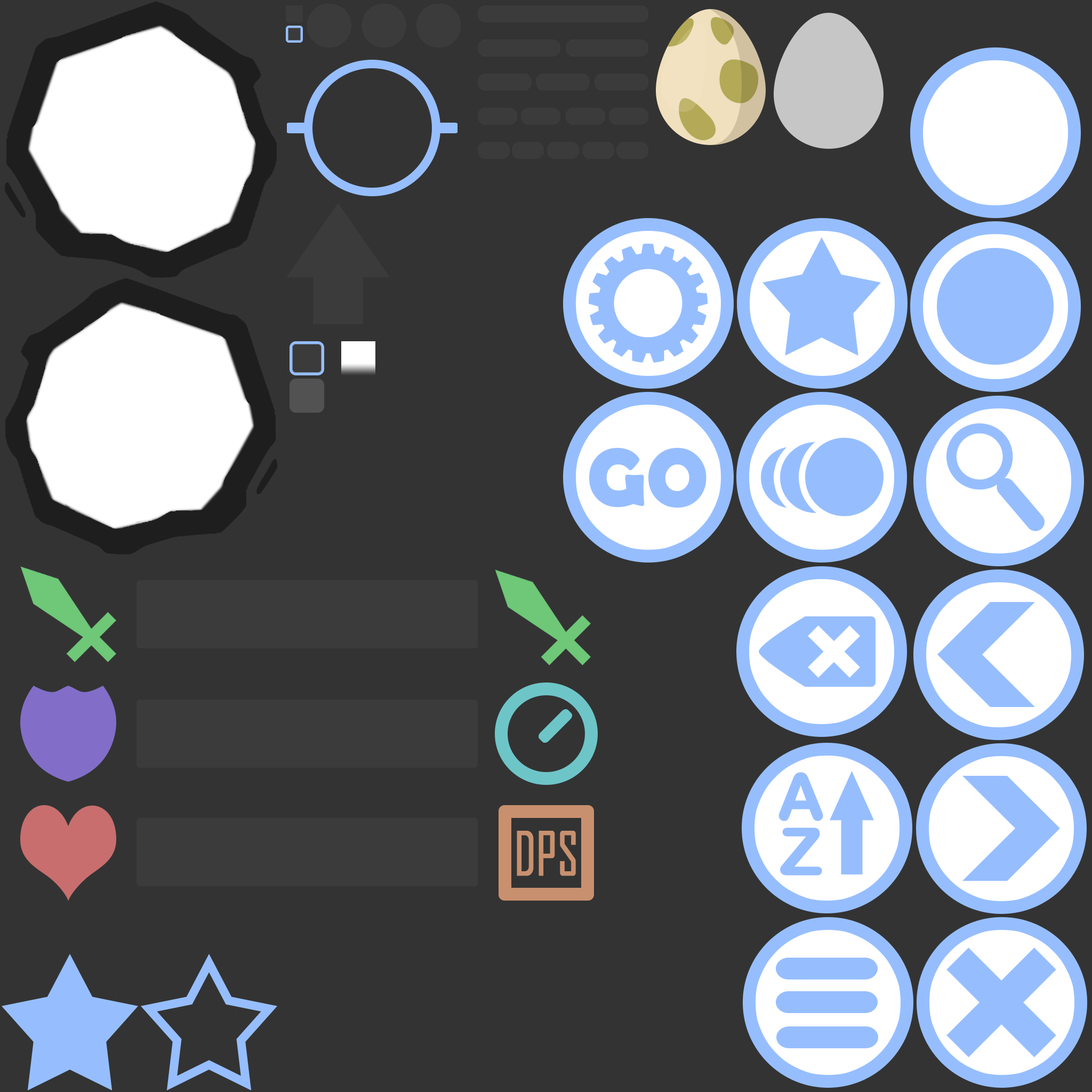
<style>
.page{position:relative;width:1092px;height:1092px;background:#333333}
.page>*{position:absolute;margin:0}
.t1{font:80px "BerlinSansFBDemi-Bold";color:#96beff;font-weight:bold}
.t2{font:64px/54.9px "ArialRoundedMTBold";color:#96beff;font-weight:bold}
.t3{font:58.3px "AgencyFB-Reg";color:#c8906e;font-weight:bold;scale:0.83 1}
</style>
<div class="page">
<p class="t1" style="left:589px;top:447px;width:117px;height:61px">GO</p>
<p class="t2" style="left:778px;top:772px;width:45px;height:104px;text-align:center">A<br>Z</p>
<p class="t3" style="left:517px;top:831px;width:59px;height:45px">DPS</p>
</div>
